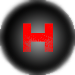
<style>
.page{position:relative;width:75px;height:75px}
.page>*{position:absolute;margin:0}
.t1{font:40px "Coalition";color:#ff0000;scale:0.83 1}
</style>
<div class="page">
<p class="t1" style="left:23px;top:23px;width:30px;height:29px">H</p>
</div>
